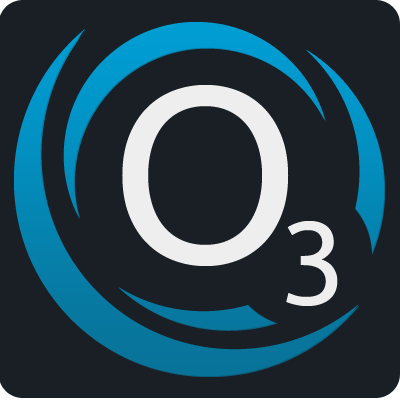
<style>
.page{position:relative;width:400px;height:400px;background:#191f25}
.page>*{position:absolute;margin:0}
.t1{font:250px "Ubuntu";color:#eeeeef;text-transform:uppercase}
.t2{font:200px "Ubuntu";color:#eeeeef;text-transform:uppercase}
</style>
<div class="page">
<p class="t1" style="left:122px;top:85px;width:167px;height:181px">O</p>
<p class="t2" style="left:286px;top:221px;width:52px;height:85px">3</p>
</div>
